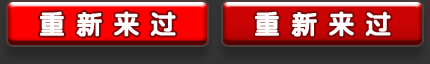
<style>
.page{position:relative;width:430px;height:64px}
.page>*{position:absolute;margin:0}
.t1{font:26px "JCuYuan";letter-spacing:0.4em;color:#ffffff;font-weight:bold}
</style>
<div class="page">
<p class="t1" style="left:40px;top:11px;width:136px;height:26px">重新来过</p>
<p class="t1" style="left:255px;top:11px;width:136px;height:26px">重新来过</p>
</div>
